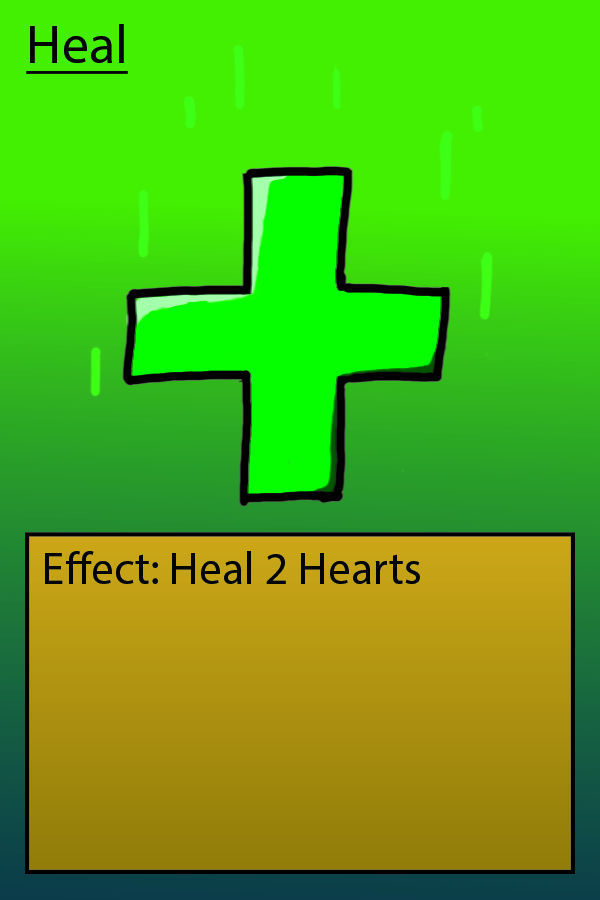
<style>
.page{position:relative;width:600px;height:900px;background:#43f001}
.page>*{position:absolute;margin:0}
.t1{font:54.2px "Vatican-Medium";color:#000000;text-decoration:underline}
.t2{font:45.8px "Vatican-Medium";color:#000000}
</style>
<div class="page">
<p class="t1" style="left:26px;top:24px;width:102px;height:50px">Heal</p>
<p class="t2" style="left:45px;top:551px;width:375px;height:33px">Effect: Heal 2 Hearts</p>
</div>
